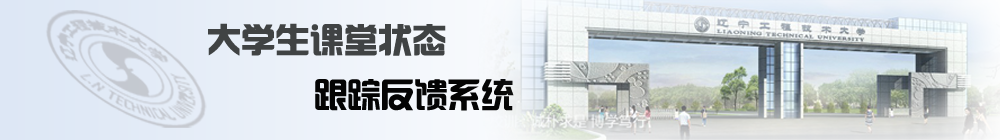
<style>
.page{position:relative;width:1000px;height:140px}
.page>*{position:absolute;margin:0}
.t1{font:33.3px "FZHZGBJW--GB1-0";color:#404344;font-weight:bold}
.t2{font:33.3px "FZHZGBJW--GB1-0";color:#040404}
</style>
<div class="page">
<p class="t1" style="left:208px;top:23px;width:238px;height:33px">大学生课堂状态</p>
<p class="t2" style="left:315px;top:79px;width:199px;height:32px">跟踪反馈系统</p>
</div>
